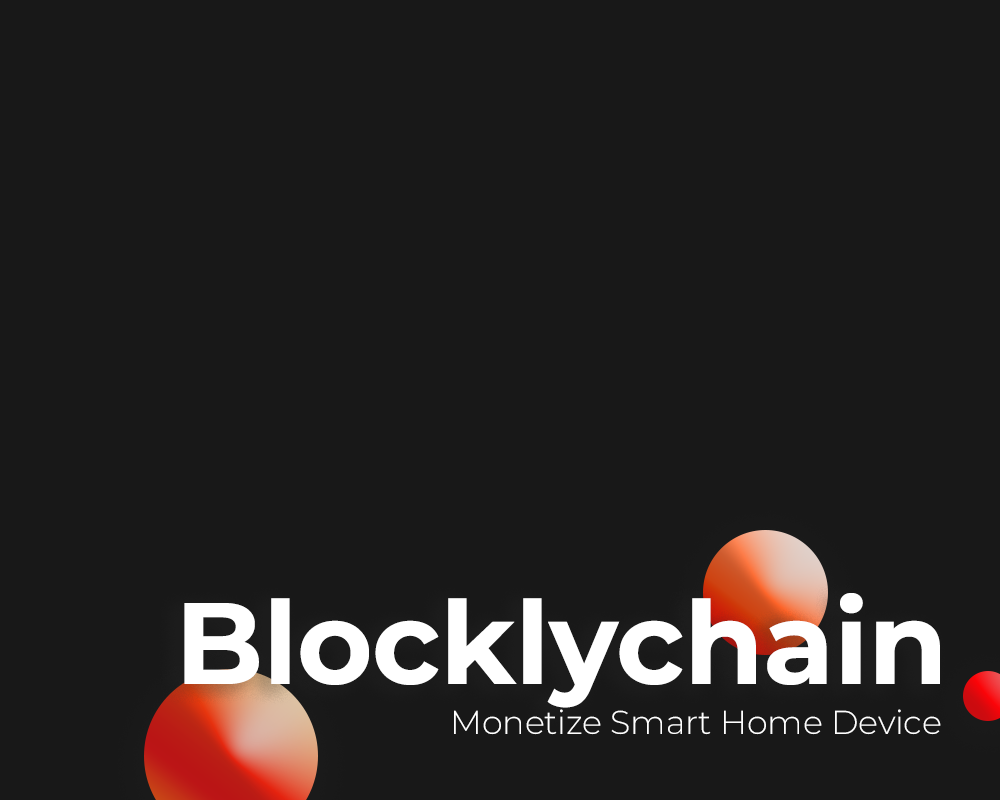
<style>
.page{position:relative;width:1000px;height:800px;background:#181818}
.page>*{position:absolute;margin:0}
.t1{font:115.6px "Montserrat-Bold";letter-spacing:-0.005em;color:#ffffff}
.t2{font:33.3px "Montserrat-Light";letter-spacing:-0.005em;color:#ffffff}
</style>
<div class="page">
<p class="t1" style="left:184px;top:593px;width:756px;height:115px">Blocklychain</p>
<p class="t2" style="left:454px;top:709px;width:487px;height:26px">Monetize Smart Home Device</p>
</div>
